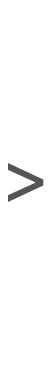
<style>
.page{position:relative;width:50px;height:367px;background:#ffffff}
.page>*{position:absolute;margin:0}
.t1{font:72px "Futura-CondensedMedium";letter-spacing:-0.075em;color:#555555}
</style>
<div class="page">
<p class="t1" style="left:8px;top:163px;width:36px;height:39px;rotate:180deg">&lt;</p>
</div>
